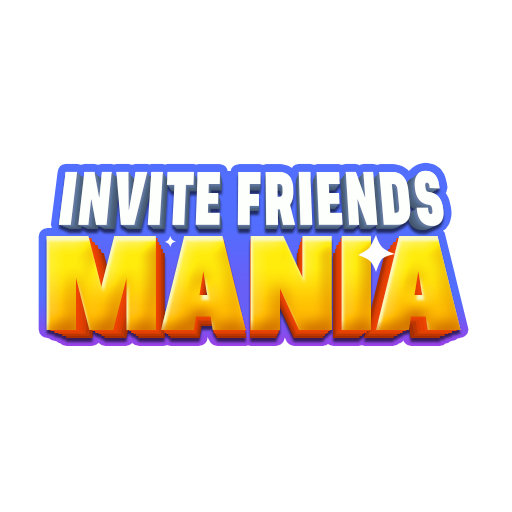
<style>
.page{position:relative;width:512px;height:512px;background:#ffffff}
.page>*{position:absolute;margin:0}
.t1{font:70.4px "AsketCondensed-ExtraBold";letter-spacing:0.025em;color:#fdfffd;scale:0.77 1}
.t2{font:69.7px "AsketCondensed-ExtraBold";letter-spacing:0.025em;color:#fdfffd;scale:0.77 1}
.t3{font:69px "AsketCondensed-ExtraBold";letter-spacing:0.025em;color:#fdfffd;scale:0.77 1}
.t4{font:68.3px "AsketCondensed-ExtraBold";letter-spacing:0.025em;color:#fdfffd;scale:0.77 1}
.t5{font:135px "PeaceSans";letter-spacing:-0.025em;scale:0.83 1}
.t6{font:132.3px "PeaceSans";letter-spacing:-0.025em;scale:0.83 1}
.t7{font:129.7px "PeaceSans";letter-spacing:-0.025em;scale:0.83 1}
.t8{font:127.1px "PeaceSans";letter-spacing:-0.025em;scale:0.83 1}
.t9{font:124.5px "PeaceSans";letter-spacing:-0.025em;scale:0.83 1}
.t10{font:122px "PeaceSans";letter-spacing:-0.025em;scale:0.83 1}
</style>
<div class="page">
<p class="t1" style="left:58px;top:170px;width:386px;height:56px">INVITE FRIENDS</p>
<p class="t1" style="left:58px;top:170px;width:386px;height:56px">INVITE FRIENDS</p>
<p class="t2" style="left:60px;top:172px;width:382px;height:55px">INVITE FRIENDS</p>
<p class="t2" style="left:60px;top:172px;width:382px;height:55px">INVITE FRIENDS</p>
<p class="t3" style="left:62px;top:173px;width:378px;height:55px">INVITE FRIENDS</p>
<p class="t3" style="left:62px;top:173px;width:378px;height:55px">INVITE FRIENDS</p>
<p class="t4" style="left:64px;top:175px;width:374px;height:54px">INVITE FRIENDS</p>
<p class="t4" style="left:64px;top:175px;width:374px;height:54px">INVITE FRIENDS</p>
<p class="t5" style="left:46px;top:236px;width:415px;height:94px">MANIA</p>
<p class="t5" style="left:46px;top:236px;width:415px;height:94px">MANIA</p>
<p class="t6" style="left:50px;top:238px;width:407px;height:93px">MANIA</p>
<p class="t6" style="left:50px;top:238px;width:407px;height:93px">MANIA</p>
<p class="t7" style="left:54px;top:242px;width:399px;height:91px">MANIA</p>
<p class="t7" style="left:54px;top:242px;width:399px;height:91px">MANIA</p>
<p class="t8" style="left:58px;top:245px;width:391px;height:89px">MANIA</p>
<p class="t8" style="left:58px;top:245px;width:391px;height:89px">MANIA</p>
<p class="t9" style="left:62px;top:249px;width:383px;height:87px">MANIA</p>
<p class="t9" style="left:62px;top:249px;width:383px;height:87px">MANIA</p>
<p class="t10" style="left:66px;top:253px;width:375px;height:85px">MANIA</p>
<p class="t10" style="left:66px;top:253px;width:375px;height:85px">MANIA</p>
</div>
